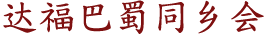
<style>
.page{position:relative;width:272px;height:36px;background:#ffffff}
.page>*{position:absolute;margin:0}
.t1{font:38px "DFKaiShu-SB-Estd-BF";color:#7e1010}
</style>
<div class="page">
<p class="t1" style="left:3px;top:0px;width:261px;height:34px">达福巴蜀同乡会</p>
</div>
